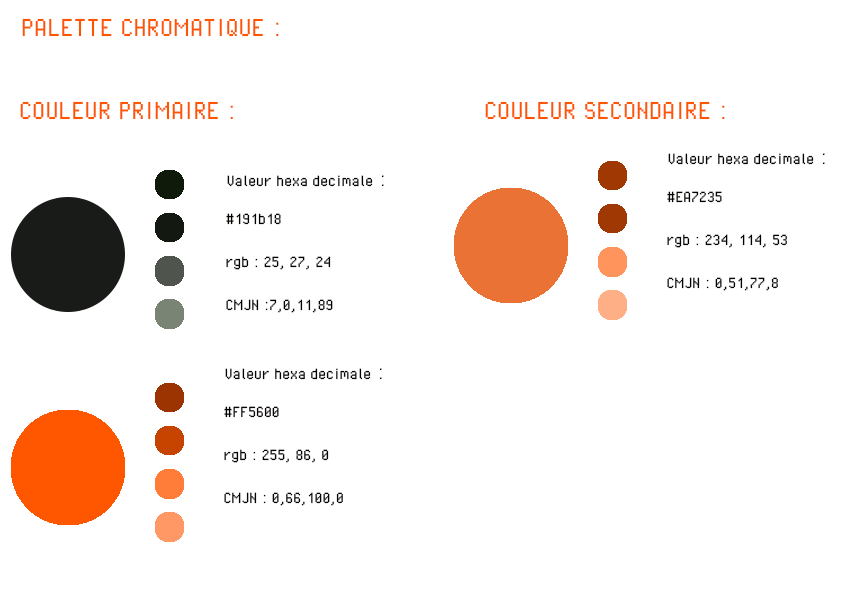
<style>
.page{position:relative;width:842px;height:595px;background:#ffffff}
.page>*{position:absolute;margin:0}
.t1{font:30px "PixelOperator";color:#fe5600}
.t2{font:18px "PixelOperator";color:#050200}
.t3{font:24px "PixelOperator";color:#050200}
.t4{font:12px "MyriadPro-Regular";color:#050200}
</style>
<div class="page">
<p class="t1" style="left:22px;top:18px;width:257px;height:19px">PALETTE CHROMATIQUE :</p>
<p class="t1" style="left:20px;top:101px;width:213px;height:19px">COULEUR PRIMAIRE :</p>
<p class="t1" style="left:485px;top:101px;width:240px;height:19px">COULEUR SECONDAIRE :</p>
<p class="t2" style="left:668px;top:153px;width:157px;height:12px">Valeur hexa decimale<span class="t3"> :</span></p>
<p class="t2" style="left:227px;top:175px;width:157px;height:12px">Valeur hexa decimale<span class="t3"> :</span></p>
<p class="t2" style="left:667px;top:191px;width:120px;height:100px"><span class="t4"><br></span>#EA7235<br><br>rgb : 234, 114, 53<br><br>CMJN : 0,51,77,8</p>
<p class="t2" style="left:226px;top:213px;width:107px;height:100px"><span class="t4"><br></span>#191b18<br><br>rgb : 25, 27, 24<br><br>CMJN :7,0,11,89</p>
<p class="t2" style="left:225px;top:368px;width:157px;height:12px">Valeur hexa decimale<span class="t3"> :</span></p>
<p class="t2" style="left:224px;top:406px;width:119px;height:100px"><span class="t4"><br></span>#FF5600<br><br>rgb : 255, 86, 0<br><br>CMJN : 0,66,100,0</p>
</div>
